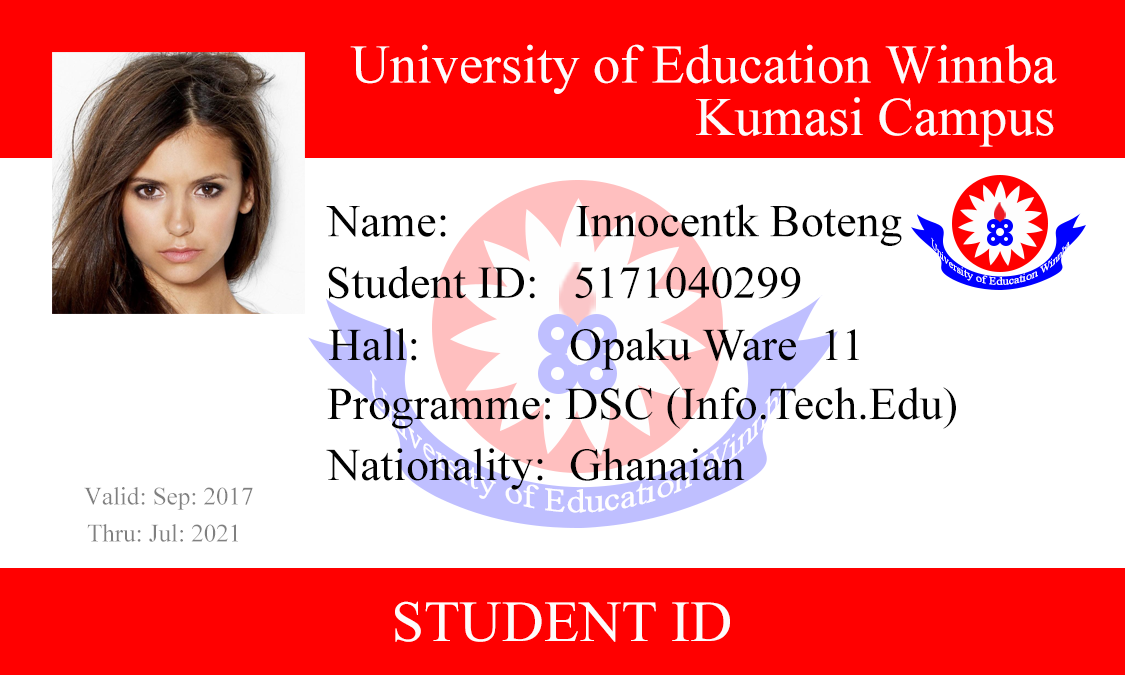
<style>
.page{position:relative;width:1125px;height:675px;background:#ffffff}
.page>*{position:absolute;margin:0}
.t1{font:54.2px "IskoolaPota";color:#fefbfb}
.t2{font:45.8px "TimesNewRomanPSMT";color:#020202}
.t3{font:25px "IskoolaPota";color:#808080}
.t4{font:58.3px "IskoolaPota";color:#fefbfb}
</style>
<div class="page">
<p class="t1" style="left:350px;top:44px;width:707px;height:50px">University of Education Winnba</p>
<p class="t1" style="left:696px;top:97px;width:358px;height:50px">Kumasi Campus</p>
<p class="t2" style="left:326px;top:204px;width:576px;height:42px">Name:           Innocentk Boteng</p>
<p class="t2" style="left:328px;top:266px;width:473px;height:33px">Student ID:   5171040299</p>
<p class="t2" style="left:329px;top:328px;width:530px;height:42px">Hall:             Opaku Ware  11</p>
<p class="t2" style="left:327px;top:387px;width:629px;height:42px">Programme: DSC (Info.Tech.Edu)</p>
<p class="t2" style="left:326px;top:448px;width:419px;height:42px">Nationality:  Ghanaian</p>
<p class="t3" style="left:84px;top:487px;width:169px;height:23px">Valid: Sep: 2017</p>
<p class="t3" style="left:87px;top:524px;width:151px;height:18px">Thru: Jul: 2021</p>
<p class="t4" style="left:395px;top:601px;width:335px;height:41px">STUDENT ID</p>
</div>
